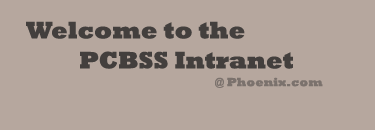
<style>
.page{position:relative;width:375px;height:130px;background:#b6a79e}
.page>*{position:absolute;margin:0}
.t1{font:24px "Rockwell-ExtraBold";color:#433f3d}
.t2{font:12px "Rockwell-ExtraBold";color:#7b726d}
</style>
<div class="page">
<p class="t1" style="left:26px;top:21px;width:219px;height:18px">Welcome to the</p>
<p class="t1" style="left:80px;top:51px;width:213px;height:18px">PCBSS Intranet</p>
<p class="t2" style="left:215px;top:77px;width:108px;height:11px">@ Phoenix.com</p>
</div>
